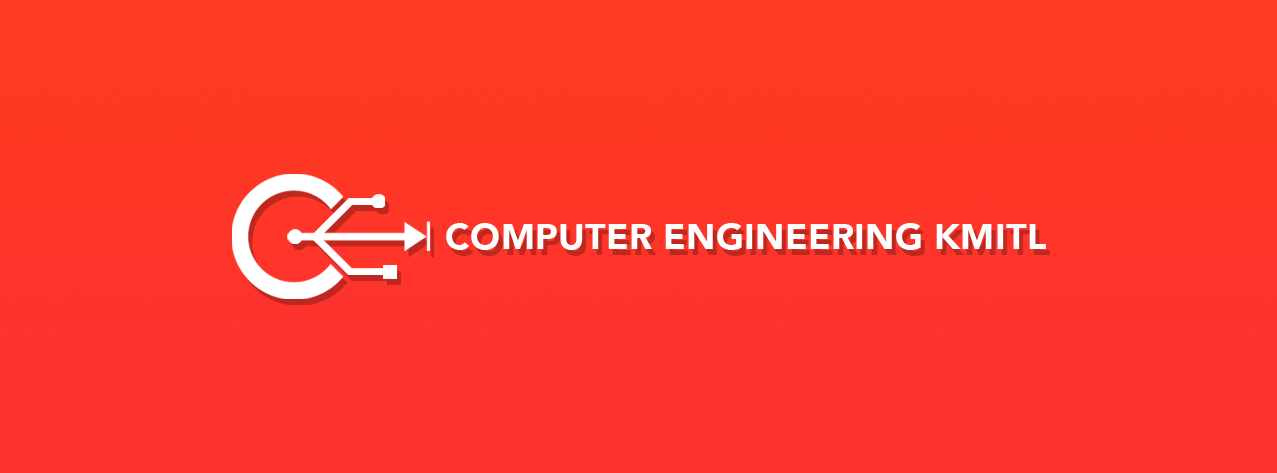
<style>
.page{position:relative;width:1277px;height:473px}
.page>*{position:absolute;margin:0}
.t1{font:36.5px "Avenir-Black";color:#ffffff}
</style>
<div class="page">
<p class="t1" style="left:446px;top:223px;width:600px;height:27px">COMPUTER ENGINEERING KMITL</p>
</div>
